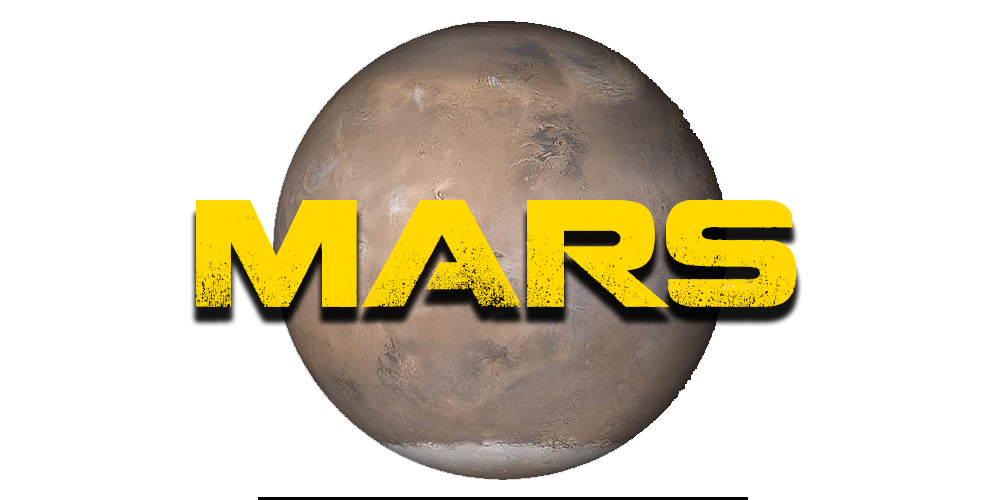
<style>
.page{position:relative;width:1000px;height:500px;background:#ffffff}
.page>*{position:absolute;margin:0}
.t1{font:150px "Coalition";color:#ffd800}
</style>
<div class="page">
<p class="t1" style="left:196px;top:199px;width:601px;height:108px">MARS</p>
<p class="t1" style="left:196px;top:199px;width:601px;height:108px">MARS</p>
</div>
